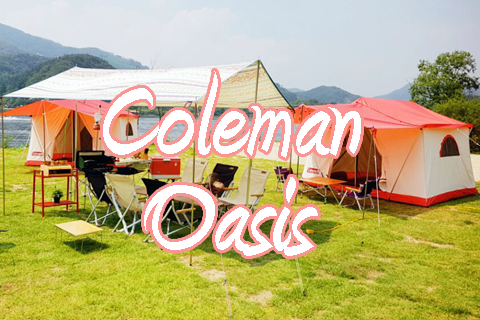
<style>
.page{position:relative;width:480px;height:320px}
.page>*{position:absolute;margin:0}
.t1{font:128px/14px "Amienne-Bold";color:#ffffff}
</style>
<div class="page">
<p class="t1" style="left:103px;top:71px;width:258px;height:185px;text-align:center">Coleman<br>Oasis</p>
</div>
